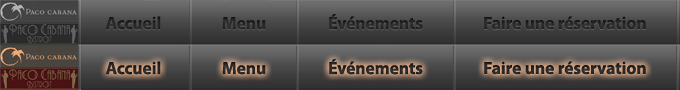
<style>
.page{position:relative;width:680px;height:90px}
.page>*{position:absolute;margin:0}
.t1{font:17.6px "MyriadPro-Bold";color:#262626}
.t2{font:17.6px "MyriadPro-Bold";color:#282727}
</style>
<div class="page">
<p class="t1" style="left:106px;top:16px;width:55px;height:14px">Accueil</p>
<p class="t2" style="left:222px;top:17px;width:44px;height:13px">Menu</p>
<p class="t2" style="left:329px;top:14px;width:94px;height:16px">Événements</p>
<p class="t2" style="left:484px;top:16px;width:162px;height:14px">Faire une réservation</p>
<p class="t1" style="left:106px;top:61px;width:55px;height:14px">Accueil</p>
<p class="t2" style="left:222px;top:62px;width:44px;height:13px">Menu</p>
<p class="t2" style="left:329px;top:59px;width:94px;height:16px">Événements</p>
<p class="t2" style="left:484px;top:61px;width:162px;height:14px">Faire une réservation</p>
</div>
